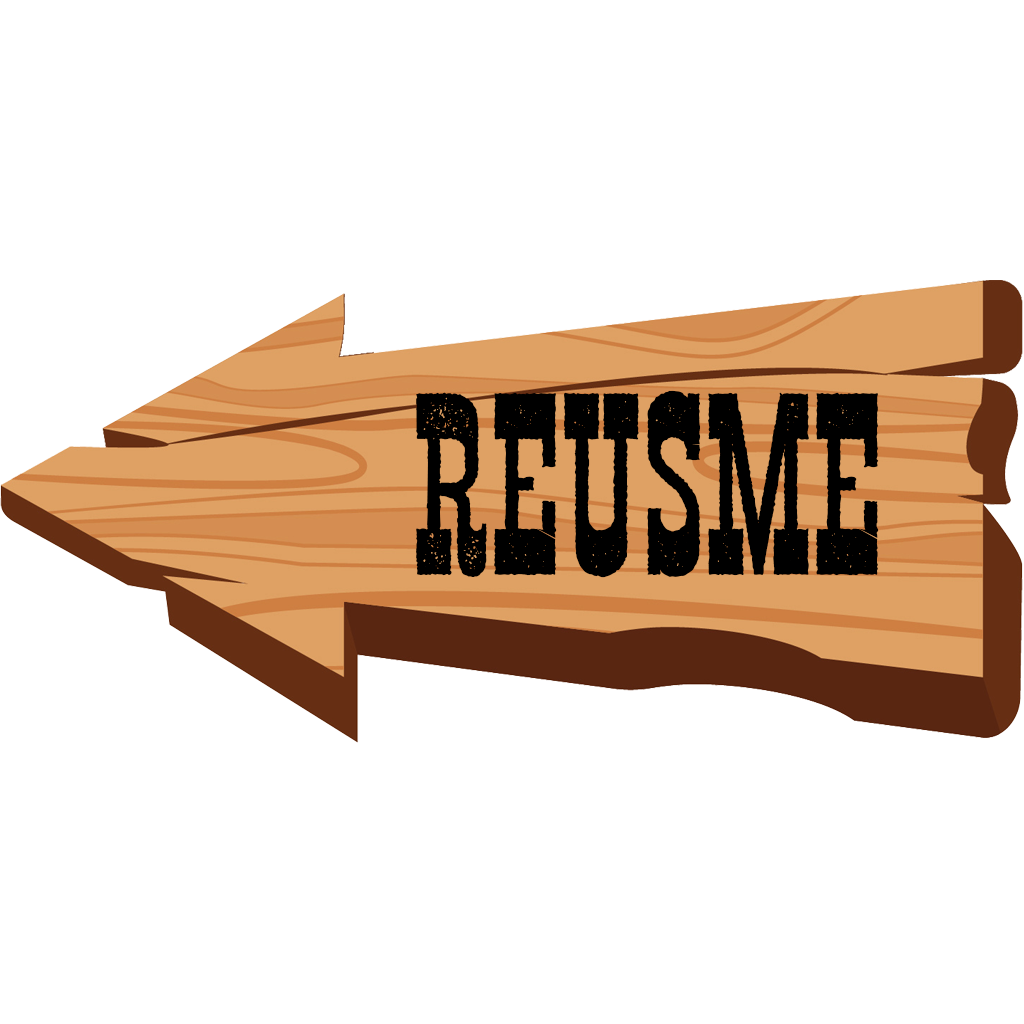
<style>
.page{position:relative;width:1024px;height:1024px;background:#ffffff}
.page>*{position:absolute;margin:0}
.t1{font:157px "DurangoWesternEroded";color:#000000}
</style>
<div class="page">
<p class="t1" style="left:416px;top:390px;width:463px;height:188px">Reusme</p>
</div>
